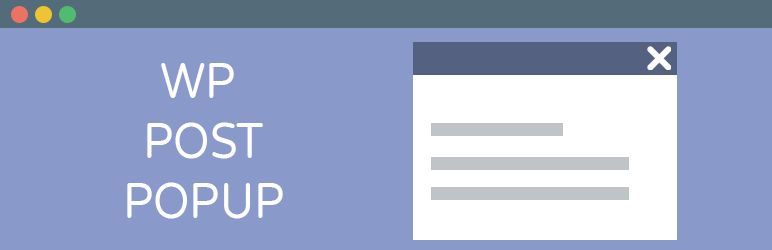
<style>
.page{position:relative;width:772px;height:250px;background:#8899ca}
.page>*{position:absolute;margin:0}
.t1{font:50px "VarelaRound-Regular";color:#ffffff;scale:0.9 1}
</style>
<div class="page">
<p class="t1" style="left:127px;top:63px;width:156px;height:156px;text-align:center">WP <br>POST<br>POPUP</p>
</div>
